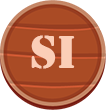
<style>
.page{position:relative;width:106px;height:110px;background:#aa4b25}
.page>*{position:absolute;margin:0}
.t1{font:48.2px "Stencil";color:#fbceb7}
</style>
<div class="page">
<p class="t1" style="left:31px;top:35px;width:44px;height:34px">SI</p>
</div>
